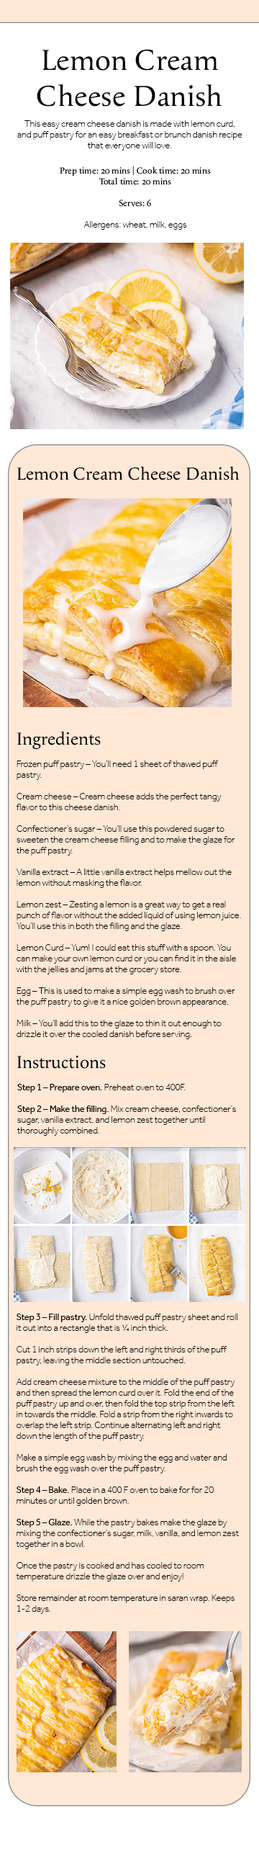
<style>
.page{position:relative;width:259px;height:1853px;background:#ffe8d5}
.page>*{position:absolute;margin:0}
.t1{font:30px "ApollineStd-Regular";color:#040404}
.t2{font:9px "Effra-Light";color:#040404}
.t3{font:9px "ApollineStd-Regular";color:#040404}
.t4{font:18px "ApollineStd-Regular";color:#040404}
.t5{font:9px "Effra-Regular";color:#040404}
</style>
<div class="page">
<p class="t1" style="left:37px;top:49px;width:185px;height:58px;text-align:center">Lemon Cream Cheese Danish</p>
<p class="t2" style="left:17px;top:120px;width:226px;height:30px;text-align:center">This easy cream cheese danish is made with lemon curd, and puff pastry for an easy breakfast or brunch danish recipe that everyone will love.</p>
<p class="t3" style="left:60px;top:166px;width:151px;height:64px;text-align:center">Prep time: 20 mins | Cook time: 20 mins  <br>Total time: 20 mins<br><br>Serves: 6<br><br><span class="t2">Allergens: wheat, milk, eggs</span></p>
<p class="t4" style="left:17px;top:467px;width:222px;height:13px">Lemon Cream Cheese Danish</p>
<p class="t4" style="left:17px;top:732px;width:84px;height:18px">Ingredients</p>
<p class="t2" style="left:16px;top:760px;width:225px;height:279px">Frozen puff pastry – You’ll need 1 sheet of thawed puff pastry.<br><br>Cream cheese – Cream cheese adds the perfect tangy flavor to this cheese danish.<br><br>Confectioner’s sugar – You’ll use this powdered sugar to sweeten the cream cheese filling and to make the glaze for the puff pastry.<br><br>Vanilla extract – A little vanilla extract helps mellow out the lemon without masking the flavor.<br><br>Lemon zest – Zesting a lemon is a great way to get a real punch of flavor without the added liquid of using lemon juice. You’ll use this in both the filling and the glaze.<br><br>Lemon Curd – Yum! I could eat this stuff with a spoon. You can make your own lemon curd or you can find it in the aisle with the jellies and jams at the grocery store.<br><br>Egg – This is used to make a simple egg wash to brush over the puff pastry to give it a nice golden brown appearance.<br><br>Milk – You’ll add this to the glaze to thin it out enough to drizzle it over the cooled danish before serving.</p>
<p class="t4" style="left:17px;top:1055px;width:89px;height:13px">Instructions</p>
<p class="t2" style="left:17px;top:1084px;width:219px;height:51px"><span class="t5">Step 1 – Prepare oven.</span> Preheat oven to 400F.<br><br><span class="t5">Step 2 – Make the filling.</span> Mix cream cheese, confectioner’s sugar, vanilla extract, and lemon zest together until thoroughly combined.</p>
<p class="t2" style="left:16px;top:1313px;width:223px;height:301px"><span class="t5">Step 3 – Fill pastry. </span>Unfold thawed puff pastry sheet and roll it out into a rectangle that is ¼ inch thick.<br><br>Cut 1 inch strips down the left and right thirds of the puff pastry, leaving the middle section untouched.<br><br>Add cream cheese mixture to the middle of the puff pastry and then spread the lemon curd over it. Fold the end of the puff pastry up and over, then fold the top strip from the left in towards the middle. Fold a strip from the right inwards to overlap the left strip. Continue alternating left and right down the length of the puff pastry.<br><br>Make a simple egg wash by mixing the egg and water and brush the egg wash over the puff pastry.<br><br><span class="t5">Step 4 – Bake. </span>Place in a 400 F oven to bake for for 20 minutes or until golden brown.<br><br><span class="t5">Step 5 – Glaze.</span> While the pastry bakes make the glaze by mixing the confectioner’s sugar, milk, vanilla, and lemon zest together in a bowl.<br><br>Once the pastry is cooked and has cooled to room temperature drizzle the glaze over and enjoy!<br><br>Store remainder at room temperature in saran wrap. Keeps 1-2 days.</p>
</div>
